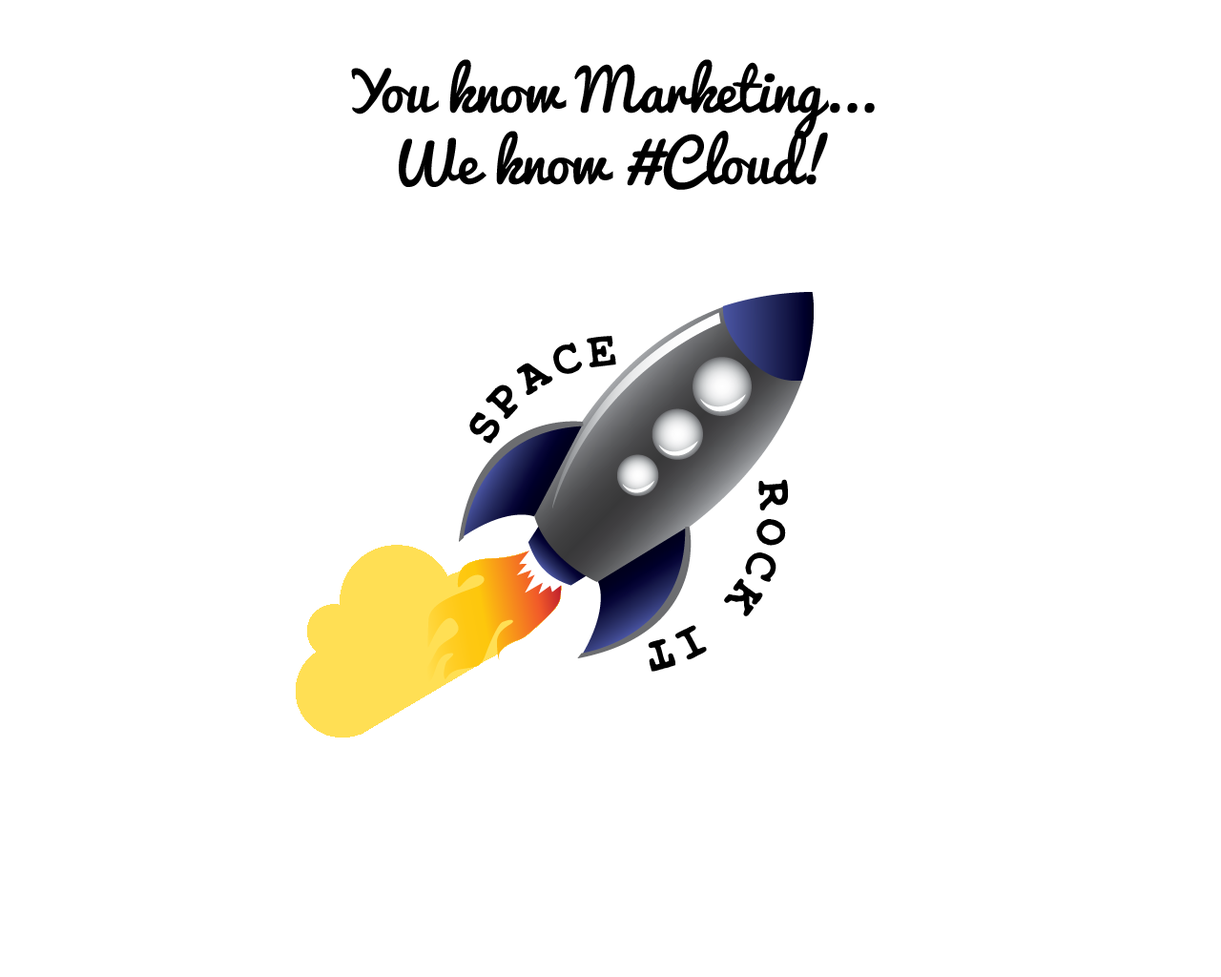
<style>
.page{position:relative;width:1221px;height:977px;background:#ffffff}
.page>*{position:absolute;margin:0}
.t1{font:57.2px/71.5px "Pacifico-Regular";color:#000000}
</style>
<div class="page">
<p class="t1" style="left:351px;top:59px;width:524px;height:131px;text-align:center">You know Marketing...<br>We know #Cloud!</p>
</div>
